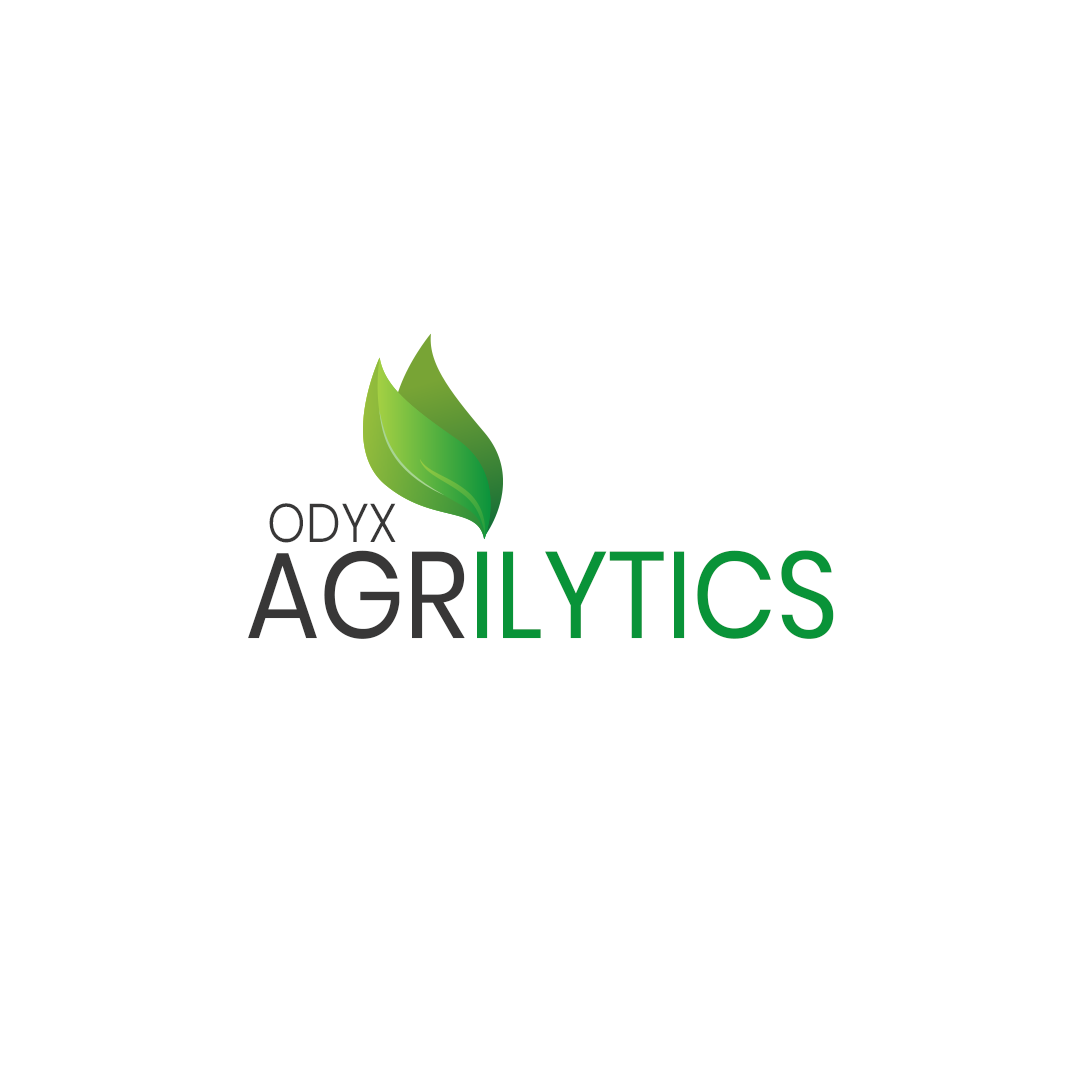
<style>
.page{position:relative;width:1080px;height:1080px;background:#ffffff}
.page>*{position:absolute;margin:0}
.t1{font:54.2px "Poppins-Light";color:#383737;text-transform:uppercase;scale:0.9 1}
.t2{font:122.6px "Poppins-Regular";color:#099338;text-transform:uppercase;scale:0.9 1}
.t3{font:122.6px "Poppins-Regular";color:#383737;text-transform:uppercase;scale:0.9 1}
</style>
<div class="page">
<p class="t1" style="left:269px;top:503px;width:127px;height:40px">ODYX</p>
<p class="t2" style="left:248px;top:550px;width:586px;height:89px"><span class="t3">AGR</span>ILYTICS</p>
</div>
